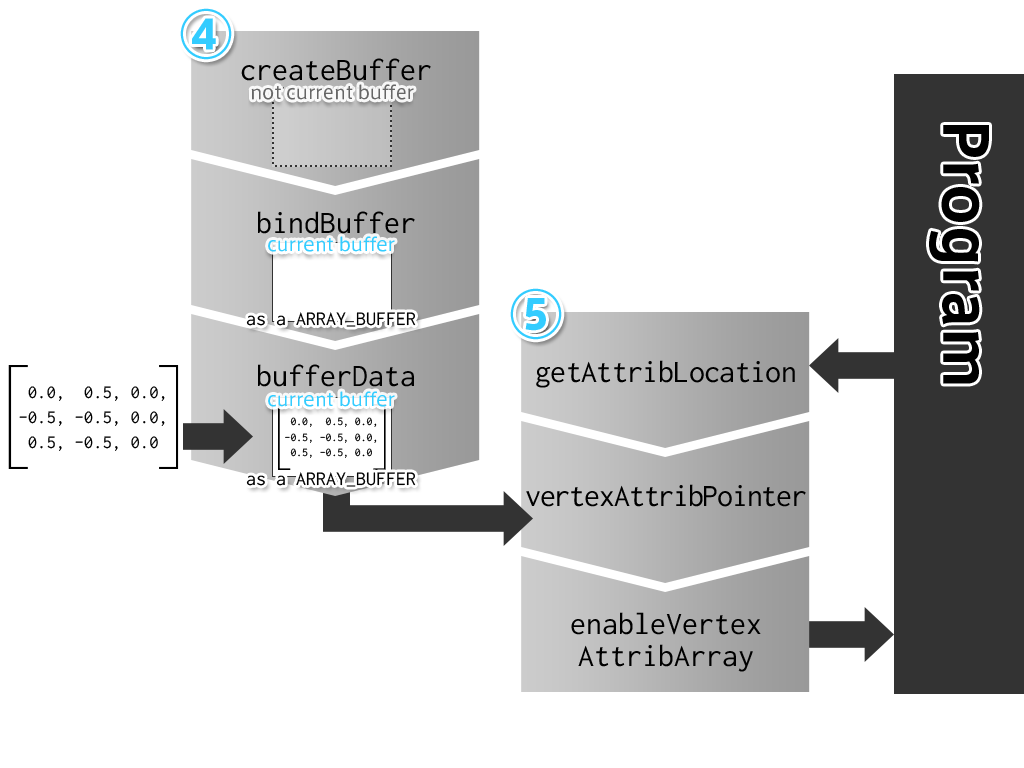
<style>
.page{position:relative;width:1024px;height:768px;background:#ffffff}
.page>*{position:absolute;margin:0}
.t1{font:60px "AxisStd-Bold";color:#33ccff}
.t2{font:32px/9px "Ricty-Regular";color:#000000}
.t3{font:18px "AxisStd-Regular";color:#666666}
.t4{font:60px "AxisStd-Bold";color:#000000}
.t5{font:18px "AxisStd-Regular";color:#33ccff}
.t6{font:20px "Ricty-Regular";color:#000000}
.t7{font:106.6px "AxisStd-UltraLight";color:#000000}
.t8{font:32px/32px "Ricty-Regular";letter-spacing:-0.02em;color:#000000}
.t9{font:32px/32px "Ricty-Regular";color:#000000}
.t10{font:18.6px/24.8px "Ricty-Regular";color:#000000}
.t11{font:66.9px "AxisStd-UltraLight";color:#000000}
.t12{font:11.7px/15.6px "Ricty-Regular";color:#000000}
</style>
<div class="page">
<p class="t1" style="left:180px;top:8px;width:52px;height:52px">④</p>
<p class="t2" style="left:241px;top:58px;width:190px;height:329px;text-align:center">createBuffer<br><br><br><br><br><br><br><br><br><br><br><br><br><br><br><br><br>bindBuffer<br><br><br><br><br><br><br><br><br><br><br><br><br><br><br><br><br>bufferData</p>
<p class="t3" style="left:251px;top:84px;width:163px;height:16px">not current buffer</p>
<p class="t4" style="left:929px;top:125px;width:60px;height:259px;rotate:90deg">Program</p>
<p class="t5" style="left:268px;top:236px;width:127px;height:16px">current buffer</p>
<p class="t1" style="left:510px;top:288px;width:52px;height:52px">⑤</p>
<p class="t6" style="left:246px;top:312px;width:170px;height:15px">as a ARRAY_BUFFER</p>
<p class="t7" style="left:8px;top:365px;width:171px;height:104px">[    ]</p>
<p class="t8" style="left:526px;top:360px;width:280px;height:312px;text-align:center">getAttribLocation<br><br><br><br>vertexAttribPointer<br><span class="t9"><br><br><br>enableVertex<br>AttribArray</span></p>
<p class="t10" style="left:19px;top:386px;width:146px;height:65px">0.0,  0.5, 0.0,<br>-0.5, -0.5, 0.0,<br> 0.5, -0.5, 0.0</p>
<p class="t5" style="left:268px;top:391px;width:127px;height:16px">current buffer</p>
<p class="t11" style="left:278px;top:404px;width:108px;height:66px">[    ]</p>
<p class="t12" style="left:285px;top:417px;width:92px;height:41px">0.0,  0.5, 0.0,<br>-0.5, -0.5, 0.0,<br> 0.5, -0.5, 0.0</p>
<p class="t6" style="left:246px;top:472px;width:170px;height:15px">as a ARRAY_BUFFER</p>
</div>
